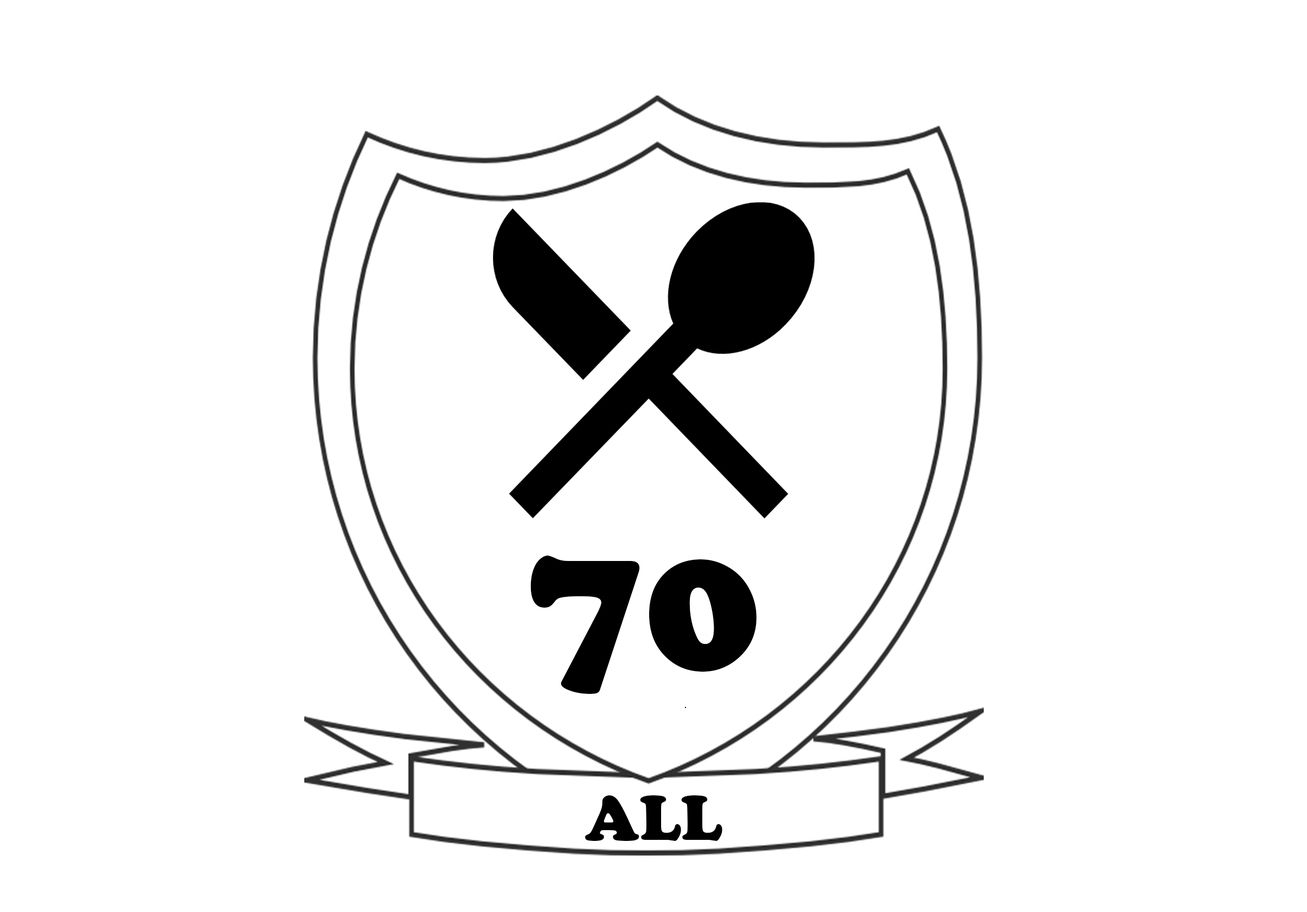
<style>
.page{position:relative;width:1307px;height:912px;background:#ffffff}
.page>*{position:absolute;margin:0}
.t1{font:195.3px "CooperBlack";color:#000000}
.t2{font:65.1px "CooperBlack";color:#000000}
</style>
<div class="page">
<p class="t1" style="left:531px;top:556px;width:226px;height:138px">70</p>
<p class="t2" style="left:585px;top:795px;width:138px;height:46px">ALL</p>
</div>
